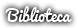
<style>
.page{position:relative;width:78px;height:28px;background:#ffffff}
.page>*{position:absolute;margin:0}
.t1{font:16px "Pacifico";color:#ffffff}
</style>
<div class="page">
<p class="t1" style="left:5px;top:6px;width:67px;height:16px">Biblioteca</p>
</div>
